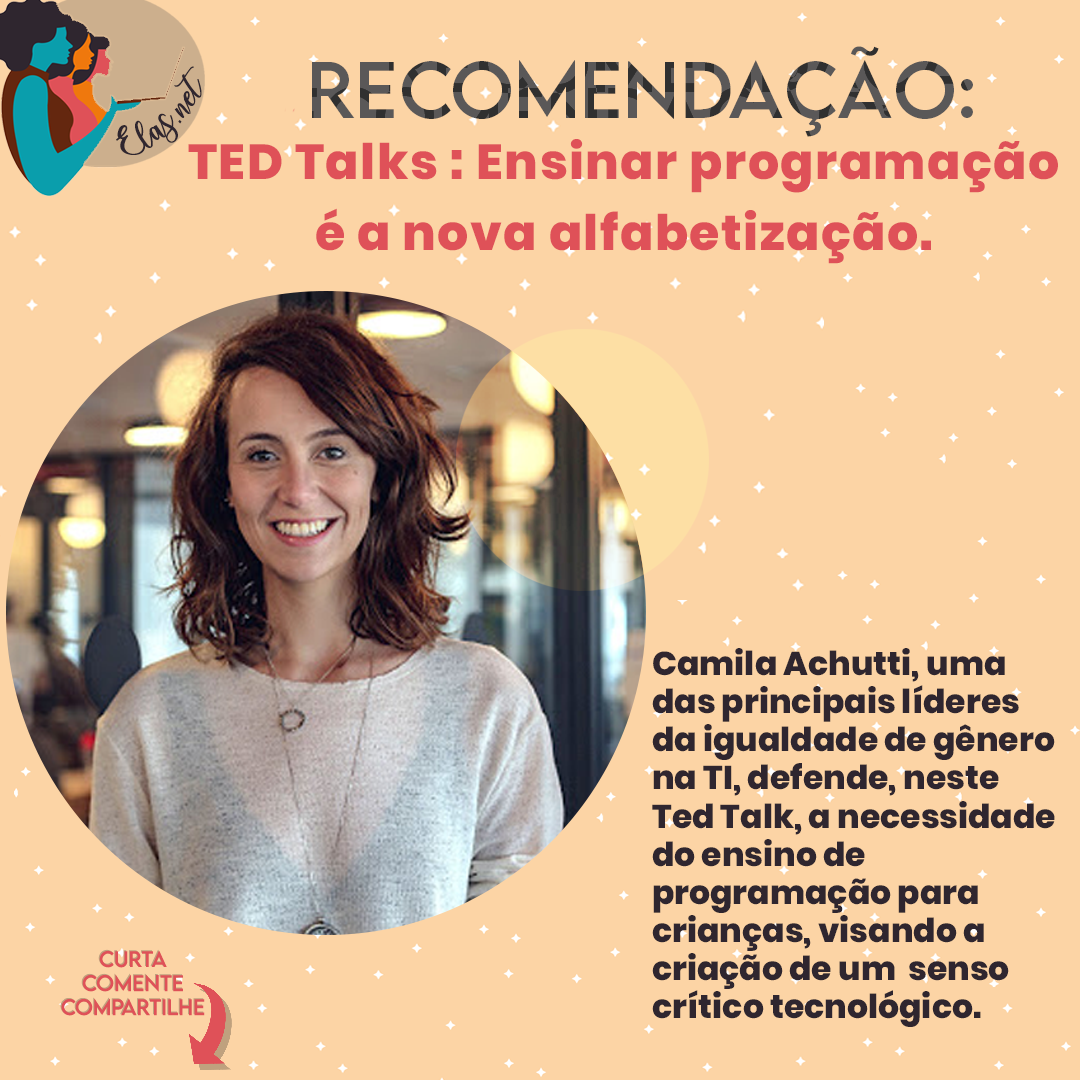
<style>
.page{position:relative;width:1080px;height:1080px;background:#fcd4a5}
.page>*{position:absolute;margin:0}
.t1{font:71.7px "LEMONMILK-Regular";letter-spacing:0.005em}
.t2{font:25px "charlinda-Regular";color:#2f262f;scale:1.18 1}
.t3{font:49px/71.3px "Poppins-ExtraBold";letter-spacing:0.03em;color:#df5158}
.t4{font:33px/38.2px "Poppins-ExtraBold";color:#2f262f}
.t5{font:20px "LEMONMILK-Regular"}
.t6{font:20px "LEMONMILK-Regular";color:#df5158}
</style>
<div class="page">
<p class="t1" style="left:312px;top:46px;width:661px;height:91px">Recomendação:</p>
<p class="t2" style="left:116px;top:66px;width:86px;height:89px;rotate:-43deg">Elas.net</p>
<p class="t3" style="left:188px;top:139px;width:870px;height:125px;text-align:center">TED Talks : Ensinar programação<br>é a nova alfabetização.</p>
<p class="t4" style="left:652px;top:648px;width:403px;height:379px">Camila Achutti, uma <br>das principais líderes <br>da igualdade de gênero <br>na TI, defende, neste <br>Ted Talk, a necessidade <br>do ensino de <br>programação para <br>crianças, visando a <br>criação de um  senso <br>crítico tecnológico.</p>
<p class="t5" style="left:60px;top:949px;width:144px;height:66px;text-align:center">Curta<br>Comente<br>Compartilhe</p>
<p class="t6" style="left:61px;top:950px;width:144px;height:66px;text-align:center">Curta<br>Comente<br>Compartilhe</p>
</div>
